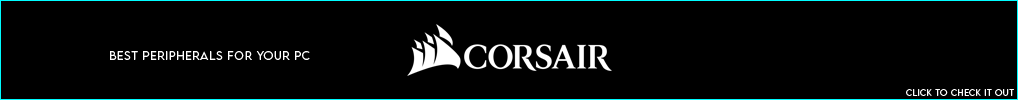
<style>
.page{position:relative;width:1018px;height:100px;background:#000000}
.page>*{position:absolute;margin:0}
.t1{font:10.8px "LEMONMILK-Light";letter-spacing:0.07em;color:#ffffff}
.t2{font:8px "LEMONMILK-Light";letter-spacing:0.07em;color:#ffffff}
</style>
<div class="page">
<p class="t1" style="left:110px;top:51px;width:200px;height:9px">best peripherals for your pc</p>
<p class="t2" style="left:906px;top:89px;width:108px;height:7px">CLICK TO CHECK IT OUT</p>
</div>
